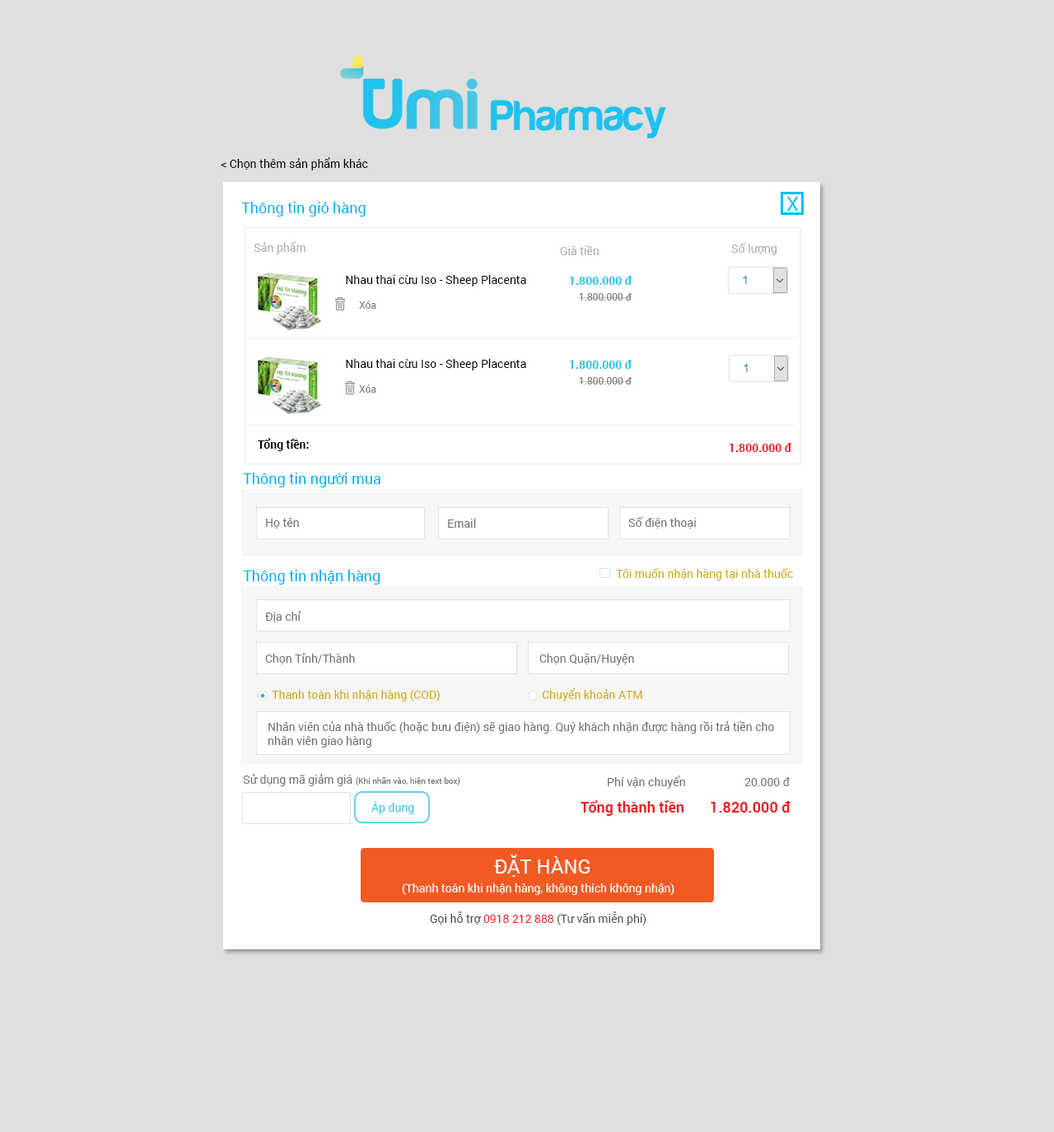
<style>
.page{position:relative;width:1054px;height:1132px;background:#dfdfdf}
.page>*{position:absolute;margin:0}
.t1{font:11.5px "Roboto-Regular";color:#000000}
.t2{font:19.7px "Roboto-Regular";color:#00bff3}
.t3{font:14.8px "Roboto-Regular";color:#00aeef}
.t4{font:11.5px "Roboto-Regular";color:#acacac}
.t5{font:11.5px "Roboto-Bold";color:#25c3eb}
.t6{font:9.9px "Roboto-Regular";color:#818181}
.t7{font:11.5px "Roboto-Bold";color:#000000}
.t8{font:11.5px "Roboto-Bold";color:#ed1c24}
.t9{font:11.5px "Roboto-Regular";color:#707070}
.t10{font:11.5px "Roboto-Regular";color:#cbab0f}
.t11{font:8.2px "Roboto-Regular";color:#707070}
.t12{font:11.5px "Roboto-Regular";color:#25c3eb}
.t13{font:14.8px "Roboto-Bold";color:#ed1c24}
.t14{font:19.8px "Roboto-Regular";color:#ffffff;text-transform:uppercase}
.t15{font:11.5px "Roboto-Regular";color:#ffffff}
.t16{font:11.5px "Roboto-Regular";color:#555555}
.t17{font:11.5px "Roboto-Regular";color:#464646}
.t18{font:11.5px "Roboto-Regular";color:#ed1c24}
</style>
<div class="page">
<p class="t1" style="left:221px;top:157px;width:147px;height:13px">&lt; Chọn thêm sản phẩm khác</p>
<p class="t2" style="left:786px;top:197px;width:12px;height:14px">X</p>
<p class="t3" style="left:241px;top:202px;width:124px;height:14px">Thông tin giỏ hàng</p>
<p class="t4" style="left:254px;top:241px;width:51px;height:13px">Sản phẩm</p>
<p class="t4" style="left:560px;top:245px;width:39px;height:10px">Giá tiền</p>
<p class="t4" style="left:731px;top:243px;width:46px;height:12px">Số lượng</p>
<p class="t1" style="left:346px;top:275px;width:180px;height:11px">Nhau thai cừu Iso - Sheep Placenta</p>
<p class="t5" style="left:570px;top:276px;width:61px;height:9px">1.800.000 đ</p>
<p class="t6" style="left:579px;top:293px;width:52px;height:7px">1.800.000 đ</p>
<p class="t6" style="left:359px;top:300px;width:17px;height:9px">Xóa</p>
<p class="t1" style="left:346px;top:359px;width:180px;height:11px">Nhau thai cừu Iso - Sheep Placenta</p>
<p class="t5" style="left:570px;top:360px;width:61px;height:9px">1.800.000 đ</p>
<p class="t6" style="left:579px;top:377px;width:52px;height:7px">1.800.000 đ</p>
<p class="t6" style="left:359px;top:384px;width:17px;height:9px">Xóa</p>
<p class="t7" style="left:258px;top:438px;width:51px;height:13px">Tổng tiền:</p>
<p class="t8" style="left:729px;top:443px;width:62px;height:9px">1.800.000 đ</p>
<p class="t3" style="left:243px;top:472px;width:137px;height:15px">Thông tin người mua</p>
<p class="t9" style="left:266px;top:518px;width:33px;height:10px">Họ tên</p>
<p class="t9" style="left:448px;top:519px;width:28px;height:9px">Email</p>
<p class="t9" style="left:628px;top:517px;width:68px;height:11px">Số điện thoại</p>
<p class="t3" style="left:243px;top:570px;width:137px;height:14px">Thông tin nhận hàng</p>
<p class="t10" style="left:616px;top:568px;width:177px;height:12px">Tôi muốn nhận hàng tại nhà thuốc</p>
<p class="t9" style="left:265px;top:611px;width:36px;height:11px">Địa chỉ</p>
<p class="t9" style="left:265px;top:653px;width:90px;height:11px">Chọn Tỉnh/Thành</p>
<p class="t9" style="left:539px;top:654px;width:95px;height:11px">Chọn Quận/Huyện</p>
<p class="t10" style="left:272px;top:690px;width:168px;height:11px">Thanh toán khi nhận hàng (COD)</p>
<p class="t10" style="left:542px;top:688px;width:100px;height:13px">Chuyển khoản ATM</p>
<p class="t9" style="left:268px;top:721px;width:506px;height:26px">Nhân viên của nhà thuốc (hoặc bưu điện) sẽ giao hàng. Quý khách nhận được hàng rồi trả tiền cho <br>nhân viên giao hàng</p>
<p class="t11" style="left:243px;top:774px;width:217px;height:12px"><span class="t9">Sử dụng mã giảm giá </span>(Khi nhấn vào, hiện text box)</p>
<p class="t9" style="left:607px;top:775px;width:78px;height:14px">Phí vận chuyển</p>
<p class="t9" style="left:744px;top:777px;width:46px;height:9px">20.000 đ</p>
<p class="t12" style="left:371px;top:801px;width:43px;height:13px">Áp dụng</p>
<p class="t13" style="left:580px;top:800px;width:104px;height:16px">Tổng thành tiền</p>
<p class="t13" style="left:710px;top:801px;width:80px;height:11px">1.820.000 đ</p>
<p class="t14" style="left:494px;top:854px;width:95px;height:23px">ĐẶT HÀNG</p>
<p class="t15" style="left:402px;top:883px;width:272px;height:12px">(Thanh toán khi nhận hàng, không thích không nhận)</p>
<p class="t16" style="left:430px;top:911px;width:216px;height:14px"><span class="t17">Gọi hỗ trợ</span><span class="t18"> 0918 212 888 </span>(Tư vấn miễn phí)</p>
</div>
